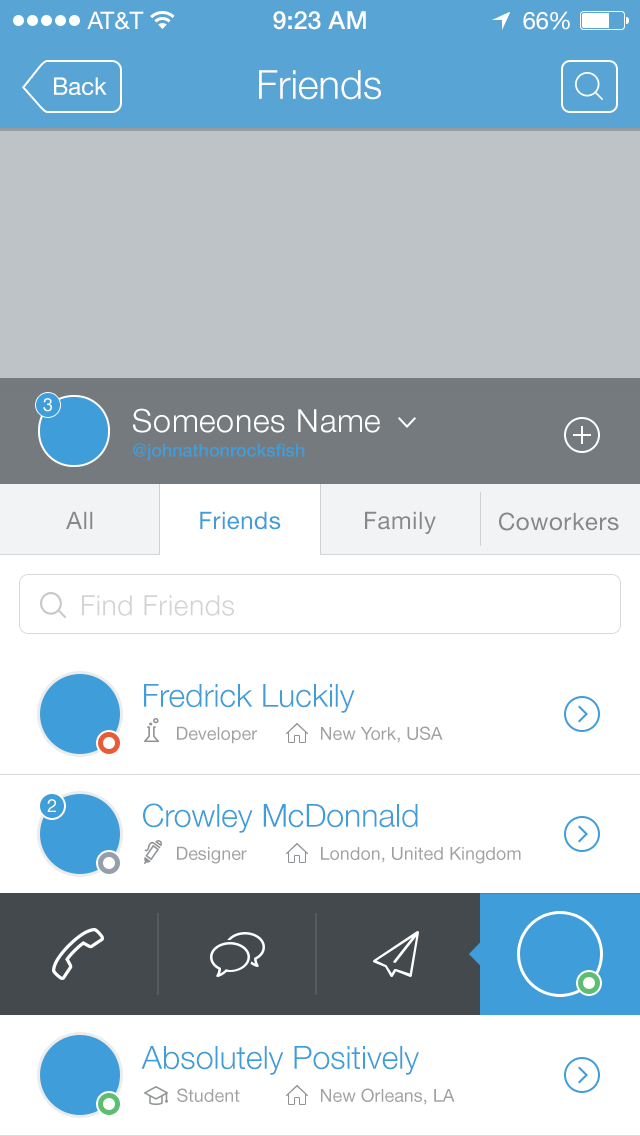
<style>
.page{position:relative;width:640px;height:1136px;background:#ffffff}
.page>*{position:absolute;margin:0}
.t1{font:24px "HelveticaNeue";color:#ffffff}
.t2{font:25px "HelveticaNeue-Medium";color:#ffffff}
.t3{font:24px "HelveticaNeue";letter-spacing:-0.02em;color:#ffffff}
.t4{font:40px "HelveticaNeue-Light";color:#ffffff}
.t5{font:18px "HelveticaNeue";color:#ffffff}
.t6{font:32px "HelveticaNeue-Light";letter-spacing:0.025em;color:#ffffff}
.t7{font:18px "HelveticaNeue-Medium";color:#3f9dd9}
.t8{font:24px "HelveticaNeue";letter-spacing:0.025em;color:#86898b}
.t9{font:24px "HelveticaNeue";letter-spacing:0.02em;color:#3f9dd9}
.t10{font:28px "HelveticaNeue-Light";letter-spacing:0.025em;color:#d2d3d4}
.t11{font:32px "HelveticaNeue-Light";color:#3f9dd9}
.t12{font:18px "HelveticaNeue";color:#9fa1a3}
</style>
<div class="page">
<p class="t1" style="left:87px;top:11px;width:57px;height:19px">AT&amp;T</p>
<p class="t2" style="left:273px;top:11px;width:93px;height:19px">9:23 AM</p>
<p class="t1" style="left:523px;top:11px;width:47px;height:19px">6<span class="t3">6</span>%</p>
<p class="t1" style="left:54px;top:77px;width:53px;height:18px">Back</p>
<p class="t4" style="left:259px;top:70px;width:122px;height:30px">Friends</p>
<p class="t5" style="left:43px;top:398px;width:9px;height:14px">3</p>
<p class="t6" style="left:133px;top:408px;width:247px;height:25px">Someones Name</p>
<p class="t7" style="left:133px;top:443px;width:172px;height:18px">@johnathonrocksfish</p>
<p class="t8" style="left:66px;top:511px;width:27px;height:18px">All</p>
<p class="t9" style="left:200px;top:511px;width:81px;height:19px">Friends</p>
<p class="t8" style="left:365px;top:511px;width:71px;height:23px">Family</p>
<p class="t8" style="left:499px;top:512px;width:120px;height:19px">Coworkers</p>
<p class="t10" style="left:82px;top:595px;width:152px;height:21px">Find Friends</p>
<p class="t11" style="left:144px;top:684px;width:211px;height:29px">Fredrick Luckily</p>
<p class="t12" style="left:177px;top:726px;width:80px;height:18px">Developer</p>
<p class="t12" style="left:321px;top:726px;width:122px;height:17px">New York, USA</p>
<p class="t5" style="left:47px;top:799px;width:9px;height:13px">2</p>
<p class="t11" style="left:143px;top:803px;width:275px;height:30px">Crowley McDonnald</p>
<p class="t12" style="left:177px;top:846px;width:70px;height:18px">Designer</p>
<p class="t12" style="left:321px;top:847px;width:200px;height:17px">London, United Kingdom</p>
<p class="t11" style="left:141px;top:1046px;width:278px;height:29px">Absolutely Positively</p>
<p class="t12" style="left:177px;top:1088px;width:63px;height:14px">Student</p>
<p class="t12" style="left:321px;top:1088px;width:134px;height:17px">New Orleans, LA</p>
</div>
